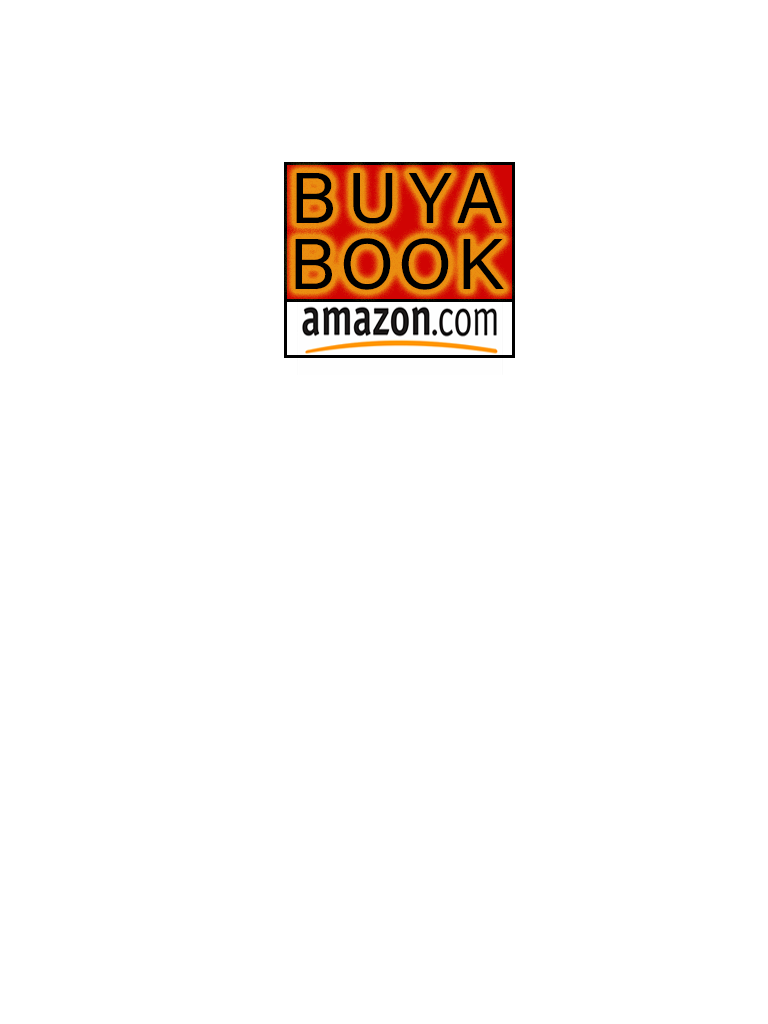
<style>
.page{position:relative;width:768px;height:1024px;background:#ffffff}
.page>*{position:absolute;margin:0}
.t1{font:72px "AcuminConcept-Regular";letter-spacing:0.15em;color:#000000;font-style:italic}
.t2{font:72px "AcuminConcept-Regular";letter-spacing:0.06em;color:#000000;font-weight:bold;font-style:italic}
</style>
<div class="page">
<p class="t1" style="left:296px;top:173px;width:206px;height:51px">BUYA</p>
<p class="t2" style="left:295px;top:238px;width:209px;height:52px">BOOK</p>
</div>
